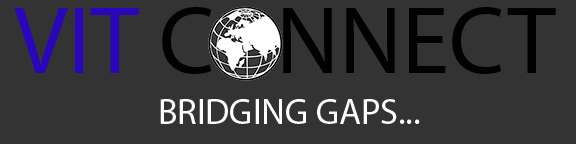
<style>
.page{position:relative;width:576px;height:144px;background:#333333}
.page>*{position:absolute;margin:0}
.t1{font:96px "MyriadPro-Regular";color:#010101}
.t2{font:96px "MyriadPro-Regular";color:#2b05b9}
.t3{font:36px "MyriadPro-Regular";color:#ffffff}
</style>
<div class="page">
<p class="t1" style="left:14px;top:7px;width:542px;height:67px"><span class="t2">VIT</span> C   NNECT</p>
<p class="t3" style="left:160px;top:99px;width:260px;height:25px">BRIDGING GAPS...</p>
</div>
